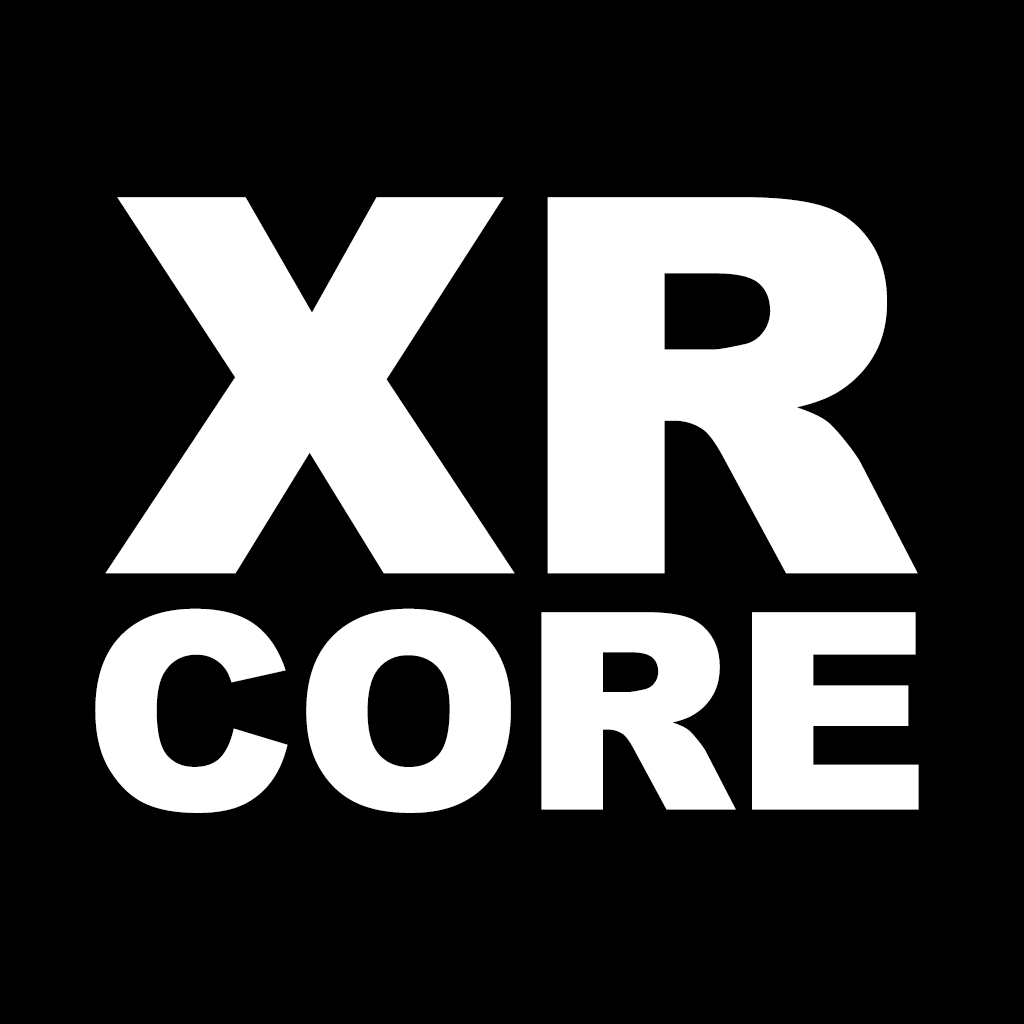
<style>
.page{position:relative;width:1024px;height:1024px;background:#000000}
.page>*{position:absolute;margin:0}
.t1{font:525px "Arial-Black";letter-spacing:-0.01em;color:#ffffff}
.t2{font:275.4px "Arial-Black";letter-spacing:-0.01em;color:#ffffff}
</style>
<div class="page">
<p class="t1" style="left:105px;top:197px;width:813px;height:377px">XR</p>
<p class="t2" style="left:95px;top:608px;width:824px;height:205px">CORE</p>
</div>
